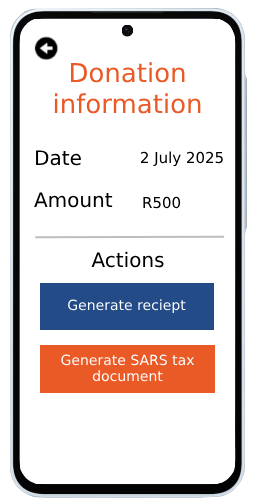
<style>
.page{position:relative;width:257px;height:502px;background:#ffffff}
.page>*{position:absolute;margin:0}
.t1{font:26px "Arial";color:#ea5a27}
.t2{font:20px "Arial";color:#000000}
.t3{font:15px "Arial";color:#000000}
.t4{font:14px "Arial";color:#ffffff}
</style>
<div class="page">
<p class="t1" style="left:54px;top:62px;width:147px;height:52px;text-align:center">Donation information</p>
<p class="t2" style="left:36px;top:150px;width:45px;height:16px">Date</p>
<p class="t3" style="left:140px;top:151px;width:83px;height:16px">2 July 2025</p>
<p class="t2" style="left:34px;top:192px;width:79px;height:16px">Amount</p>
<p class="t3" style="left:143px;top:196px;width:38px;height:13px">R500</p>
<p class="t2" style="left:91px;top:251px;width:73px;height:17px">Actions</p>
<p class="t4" style="left:68px;top:299px;width:118px;height:14px">Generate reciept</p>
<p class="t4" style="left:61px;top:354px;width:134px;height:28px;text-align:center">Generate SARS tax document</p>
</div>
